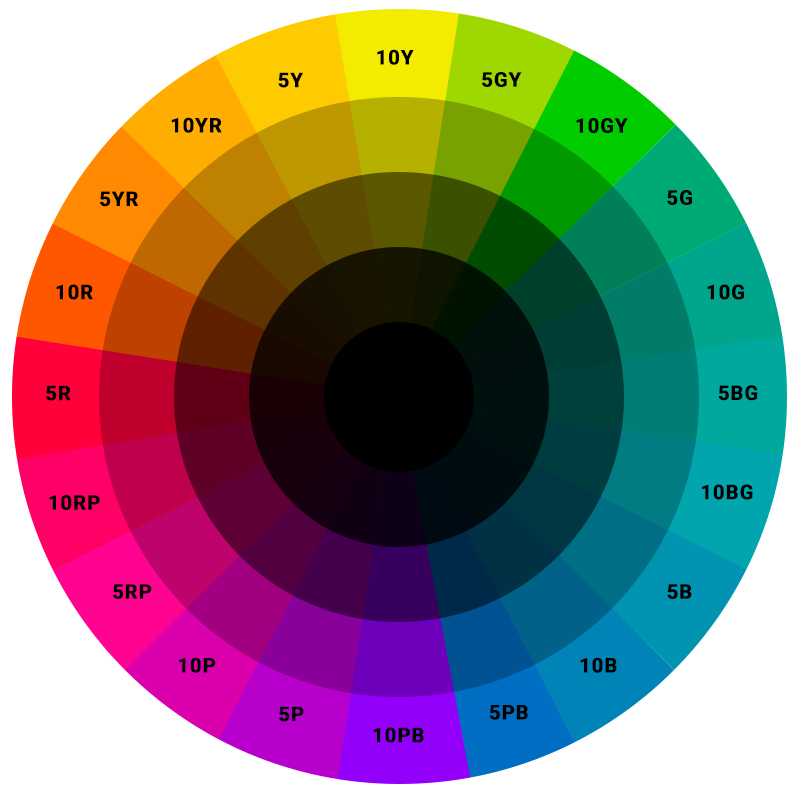
<style>
.page{position:relative;width:800px;height:800px;background:#ffffff}
.page>*{position:absolute;margin:0}
.t1{font:20px "Roboto-Bold";letter-spacing:0.03em;color:#000000;text-transform:uppercase;font-weight:bold}
</style>
<div class="page">
<p class="t1" style="left:377px;top:49px;width:37px;height:16px">10Y</p>
<p class="t1" style="left:278px;top:72px;width:25px;height:16px">5Y</p>
<p class="t1" style="left:482px;top:72px;width:40px;height:15px">5GY</p>
<p class="t1" style="left:171px;top:117px;width:51px;height:16px">10YR</p>
<p class="t1" style="left:576px;top:118px;width:52px;height:15px">10GY</p>
<p class="t1" style="left:100px;top:191px;width:38px;height:16px">5YR</p>
<p class="t1" style="left:667px;top:190px;width:25px;height:15px">5G</p>
<p class="t1" style="left:56px;top:284px;width:37px;height:16px">10R</p>
<p class="t1" style="left:707px;top:284px;width:37px;height:16px">10G</p>
<p class="t1" style="left:46px;top:385px;width:25px;height:16px">5R</p>
<p class="t1" style="left:718px;top:385px;width:40px;height:16px">5BG</p>
<p class="t1" style="left:702px;top:484px;width:51px;height:16px">10BG</p>
<p class="t1" style="left:49px;top:495px;width:51px;height:15px">10RP</p>
<p class="t1" style="left:113px;top:584px;width:39px;height:15px">5RP</p>
<p class="t1" style="left:667px;top:584px;width:25px;height:15px">5B</p>
<p class="t1" style="left:179px;top:657px;width:37px;height:16px">10P</p>
<p class="t1" style="left:580px;top:657px;width:37px;height:16px">10B</p>
<p class="t1" style="left:279px;top:706px;width:25px;height:16px">5P</p>
<p class="t1" style="left:489px;top:705px;width:39px;height:15px">5PB</p>
<p class="t1" style="left:373px;top:727px;width:51px;height:16px">10PB</p>
</div>
